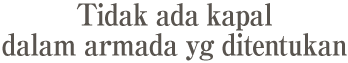
<style>
.page{position:relative;width:348px;height:63px;background:#ffffff}
.page>*{position:absolute;margin:0}
.t1{font:30px/30px "RyuminPro-ExBold";letter-spacing:-0.04em;color:#59544f;scale:0.9 1}
</style>
<div class="page">
<p class="t1" style="left:2px;top:3px;width:345px;height:58px;text-align:center">Tidak ada kapal<br>dalam armada yg ditentukan</p>
</div>
